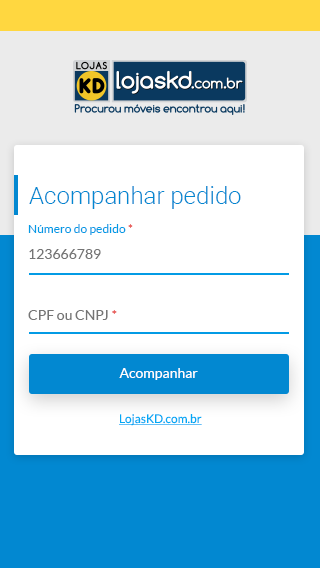
<style>
.page{position:relative;width:320px;height:568px;background:#ffffff}
.page>*{position:absolute;margin:0}
.t1{font:24px "Roboto-Light";color:#0288d1}
.t2{font:12px "Lato-Regular";color:#039be5}
.t3{font:12px "Lato-Regular";color:#e53935}
.t4{font:12px "MyriadPro-Regular";color:#757575}
.t5{font:14px "Lato-Regular";color:#757575}
.t6{font:14px "Lato-Regular";color:#e53935}
.t7{font:14px "Lato-Regular";color:#ffffff}
.t8{font:12px "Lato-Regular";color:#03a9f4;text-decoration:underline}
</style>
<div class="page">
<p class="t1" style="left:29px;top:186px;width:212px;height:23px">Acompanhar pedido</p>
<p class="t2" style="left:28px;top:224px;width:105px;height:11px">Número do pedido <span class="t3">*</span></p>
<p class="t4" style="left:29px;top:249px;width:72px;height:10px">123666789</p>
<p class="t5" style="left:28px;top:310px;width:89px;height:10px">CPF ou CNPJ <span class="t6">*</span></p>
<p class="t7" style="left:119px;top:368px;width:79px;height:12px">Acompanhar</p>
<p class="t8" style="left:119px;top:414px;width:83px;height:12px">LojasKD.com.br</p>
</div>
